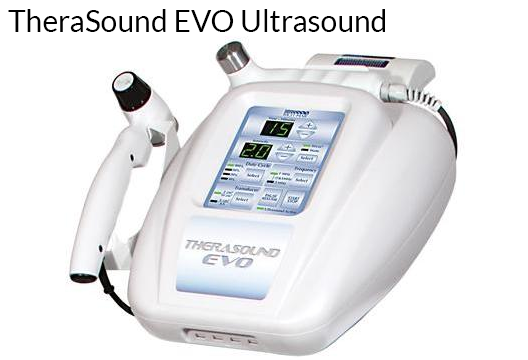
<style>
.page{position:relative;width:528px;height:360px;background:#ffffff}
.page>*{position:absolute;margin:0}
.t1{font:30px "Lato-Regular";color:#000000}
</style>
<div class="page">
<p class="t1" style="left:8px;top:9px;width:377px;height:23px">TheraSound EVO Ultrasound</p>
</div>
